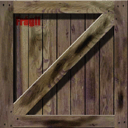
<style>
.page{position:relative;width:128px;height:128px}
.page>*{position:absolute;margin:0}
.t1{font:10.7px "Impact";letter-spacing:-0.02em;font-weight:bold}
</style>
<div class="page">
<p class="t1" style="left:15px;top:16px;width:31px;height:11px">Fragile</p>
<p class="t1" style="left:15px;top:16px;width:26px;height:11px">Frágil</p>
</div>
